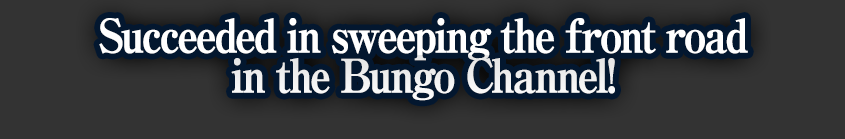
<style>
.page{position:relative;width:845px;height:139px;background:#333333}
.page>*{position:absolute;margin:0}
.t1{font:46px/40px "RyuminPro-ExBold";letter-spacing:-0.08em;color:#ffffff;font-weight:bold;scale:0.9 1}
</style>
<div class="page">
<p class="t1" style="left:99px;top:18px;width:649px;height:83px;text-align:center">Succeeded in sweeping the front road<br>in the Bungo Channel!</p>
</div>
